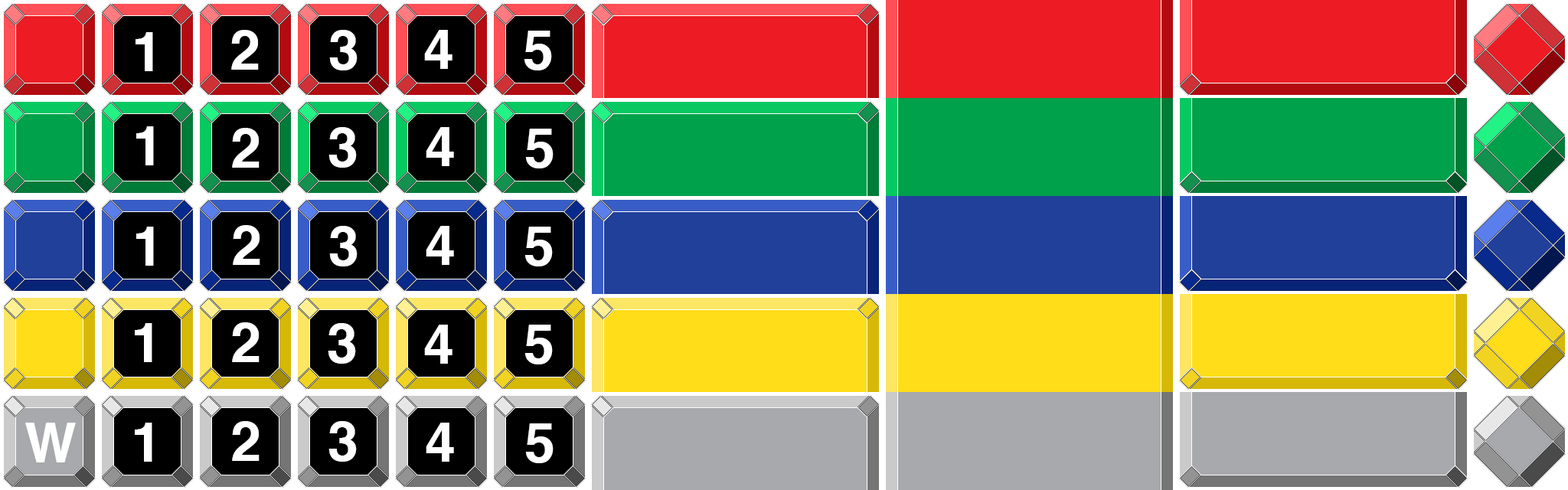
<style>
.page{position:relative;width:1568px;height:490px}
.page>*{position:absolute;margin:0}
.t1{font:55.1px "Helvetica-Bold";color:#ffffff}
</style>
<div class="page">
<p class="t1" style="left:231px;top:30px;width:28px;height:40px">2</p>
<p class="t1" style="left:329px;top:30px;width:29px;height:40px">3</p>
<p class="t1" style="left:424px;top:30px;width:28px;height:39px">4</p>
<p class="t1" style="left:136px;top:32px;width:17px;height:39px">1</p>
<p class="t1" style="left:524px;top:31px;width:28px;height:39px">5</p>
<p class="t1" style="left:136px;top:126px;width:18px;height:39px">1</p>
<p class="t1" style="left:232px;top:128px;width:28px;height:40px">2</p>
<p class="t1" style="left:328px;top:127px;width:29px;height:41px">3</p>
<p class="t1" style="left:426px;top:127px;width:28px;height:39px">4</p>
<p class="t1" style="left:525px;top:129px;width:29px;height:39px">5</p>
<p class="t1" style="left:136px;top:227px;width:18px;height:39px">1</p>
<p class="t1" style="left:233px;top:225px;width:27px;height:40px">2</p>
<p class="t1" style="left:329px;top:226px;width:29px;height:40px">3</p>
<p class="t1" style="left:426px;top:226px;width:28px;height:39px">4</p>
<p class="t1" style="left:524px;top:227px;width:29px;height:39px">5</p>
<p class="t1" style="left:135px;top:323px;width:17px;height:39px">1</p>
<p class="t1" style="left:232px;top:322px;width:28px;height:40px">2</p>
<p class="t1" style="left:328px;top:323px;width:28px;height:41px">3</p>
<p class="t1" style="left:424px;top:325px;width:28px;height:39px">4</p>
<p class="t1" style="left:524px;top:325px;width:29px;height:39px">5</p>
<p class="t1" style="left:25px;top:423px;width:51px;height:39px">W</p>
<p class="t1" style="left:135px;top:423px;width:17px;height:39px">1</p>
<p class="t1" style="left:232px;top:421px;width:28px;height:40px">2</p>
<p class="t1" style="left:328px;top:421px;width:29px;height:41px">3</p>
<p class="t1" style="left:426px;top:423px;width:28px;height:39px">4</p>
<p class="t1" style="left:525px;top:423px;width:29px;height:40px">5</p>
</div>
